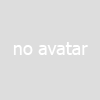
<style>
.page{position:relative;width:100px;height:100px;background:#dddddd}
.page>*{position:absolute;margin:0}
.t1{font:18px "Tahoma";color:#ffffff}
</style>
<div class="page">
<p class="t1" style="left:13px;top:42px;width:75px;height:13px">no avatar</p>
</div>
